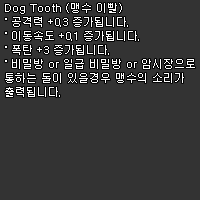
<style>
.page{position:relative;width:200px;height:200px;background:#333333}
.page>*{position:absolute;margin:0}
.t1{font:11px/14px "Dotum";color:#ffffff}
</style>
<div class="page">
<p class="t1" style="left:5px;top:3px;width:190px;height:94px">Dog Tooth (맹수 이빨)<br>˚ 공격력 +0.3 증가됩니다.<br>˚ 이동속도 +0.1 증가됩니다.<br>˚ 폭탄 +3 증가됩니다.<br>˚ 비밀방 or 일급 비밀방 or 암시장으로<br>통하는 돌이 있을경우 맹수의 소리가<br>출력됩니다.</p>
</div>
